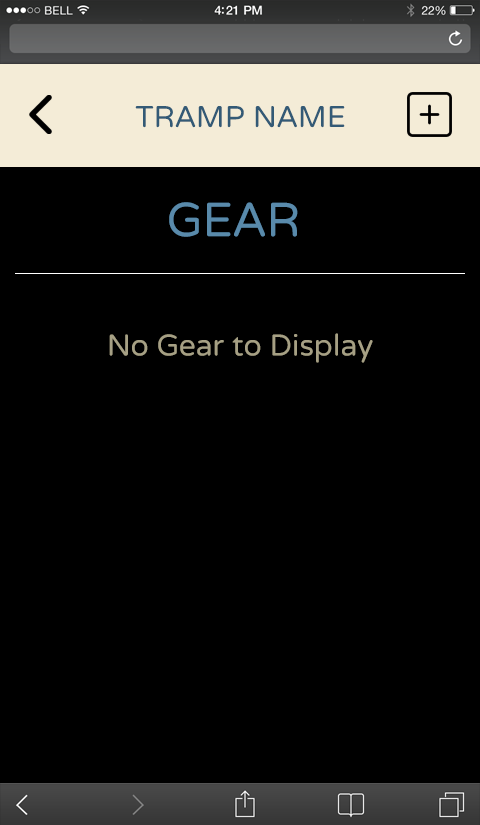
<style>
.page{position:relative;width:480px;height:825px;background:#000000}
.page>*{position:absolute;margin:0}
.t1{font:30px "VarelaRound-Regular";color:#335a76;text-transform:uppercase}
.t2{font:48px "VarelaRound-Regular";color:#598aab;text-transform:uppercase}
.t3{font:30px "VarelaRound-Regular";color:#a6a084}
</style>
<div class="page">
<p class="t1" style="left:135px;top:106px;width:210px;height:22px">TRAMP Name</p>
<p class="t2" style="left:169px;top:202px;width:129px;height:35px">GEAR</p>
<p class="t3" style="left:109px;top:333px;width:264px;height:30px">No Gear to Display</p>
</div>
